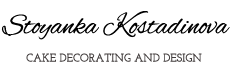
<style>
.page{position:relative;width:232px;height:70px;background:#ffffff}
.page>*{position:absolute;margin:0}
.t1{font:29.8px "AlexBrush-Regular";color:#000000;scale:0.96 1}
.t2{font:11.3px "JosefinSlab-SemiBold";color:#413c3c}
</style>
<div class="page">
<p class="t1" style="left:1px;top:11px;width:229px;height:29px">Stoyanka Kostadinova</p>
<p class="t2" style="left:26px;top:53px;width:176px;height:9px">CAKE DECORATING AND DESIGN</p>
</div>
